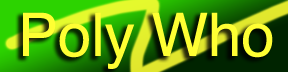
<style>
.page{position:relative;width:288px;height:72px}
.page>*{position:absolute;margin:0}
.t1{font:60px "Helvetica";color:#ffff33}
</style>
<div class="page">
<p class="t1" style="left:23px;top:12px;width:250px;height:57px">Poly Who</p>
</div>
